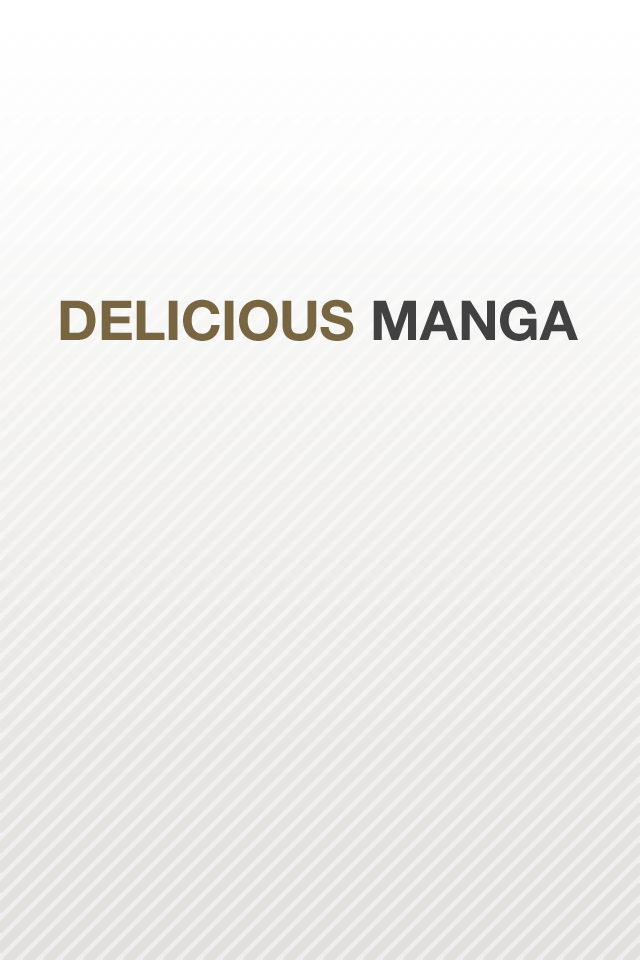
<style>
.page{position:relative;width:640px;height:960px}
.page>*{position:absolute;margin:0}
.t1{font:55px "HelveticaNeue-Bold";color:#786541;text-transform:uppercase}
.t2{font:55px "HelveticaNeue-Bold";color:#414141;text-transform:uppercase}
</style>
<div class="page">
<p class="t1" style="left:60px;top:299px;width:518px;height:42px">Delicious <span class="t2">Manga</span></p>
</div>
